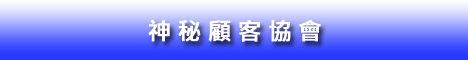
<style>
.page{position:relative;width:468px;height:60px}
.page>*{position:absolute;margin:0}
.t1{font:24px "MicrosoftJhengHeiBold";letter-spacing:-0.025em;color:#ffffff;font-weight:bold}
</style>
<div class="page">
<p class="t1" style="left:148px;top:19px;width:173px;height:23px">神 秘 顧 客 協 會</p>
</div>
